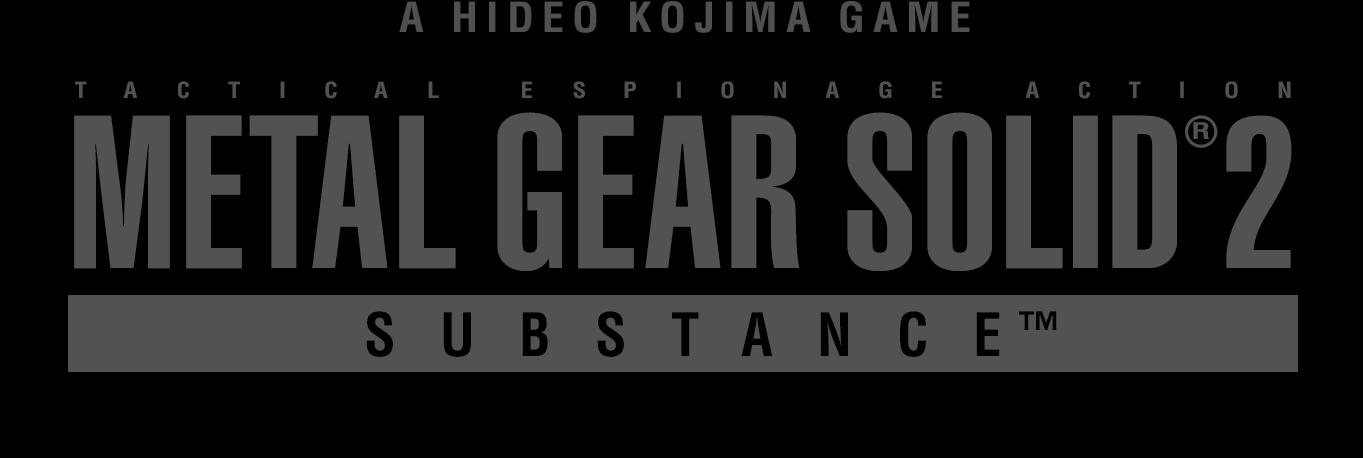
<style>
.page{position:relative;width:1363px;height:458px;background:#000000}
.page>*{position:absolute;margin:0}
.t1{font:40.4px "Helvetica-Condensed-Bold";letter-spacing:0.188em;color:#505050;scale:1.09 1}
.t2{font:21.8px "Helvetica-Condensed-Bold";letter-spacing:0.048em;color:#525252;scale:1.13 1}
.t3{font:213.8px "Helvetica-UltraCompressed";letter-spacing:0.048em;color:#525252;scale:1.09 1}
.t4{font:213.8px "Helvetica-UltraCompressed";letter-spacing:0.02em;color:#525252;scale:1.09 1}
.t5{font:40.9px "Helvetica-Condensed-Bold";letter-spacing:0.048em;color:#525252}
.t6{font:22.5px "Helvetica-Condensed-Bold";letter-spacing:0.048em;color:#525252;scale:1.37 1}
.t7{font:211.5px "Helvetica-UltraCompressed";letter-spacing:0.048em;color:#525252;scale:1.1 1}
.t8{font:58.5px "Helvetica-Condensed-Bold";letter-spacing:0.78em;color:#000000}
.t9{font:46.4px "Helvetica-Condensed-Bold";letter-spacing:0.78em;color:#000000;scale:1.04 1}
</style>
<div class="page">
<p class="t1" style="left:399px;top:1px;width:571px;height:32px">A HIDEO KOJIMA GAME</p>
<p class="t2" style="left:75px;top:81px;width:12px;height:17px">T</p>
<p class="t2" style="left:123px;top:81px;width:14px;height:17px">A</p>
<p class="t2" style="left:178px;top:81px;width:11px;height:18px">C</p>
<p class="t2" style="left:228px;top:81px;width:12px;height:17px">T</p>
<p class="t2" style="left:280px;top:81px;width:5px;height:17px">I</p>
<p class="t2" style="left:325px;top:81px;width:12px;height:18px">C</p>
<p class="t2" style="left:374px;top:81px;width:14px;height:17px">A</p>
<p class="t2" style="left:428px;top:81px;width:11px;height:17px">L</p>
<p class="t2" style="left:522px;top:81px;width:10px;height:17px">E</p>
<p class="t2" style="left:573px;top:81px;width:12px;height:18px">S</p>
<p class="t2" style="left:624px;top:81px;width:12px;height:17px">P</p>
<p class="t2" style="left:677px;top:81px;width:4px;height:17px">I</p>
<p class="t2" style="left:721px;top:81px;width:13px;height:18px">O</p>
<p class="t2" style="left:774px;top:81px;width:12px;height:17px">N</p>
<p class="t2" style="left:825px;top:81px;width:14px;height:17px">A</p>
<p class="t2" style="left:879px;top:81px;width:13px;height:18px">G</p>
<p class="t2" style="left:932px;top:81px;width:10px;height:17px">E</p>
<p class="t2" style="left:1025px;top:81px;width:14px;height:17px">A</p>
<p class="t2" style="left:1079px;top:81px;width:11px;height:18px">C</p>
<p class="t2" style="left:1129px;top:81px;width:12px;height:17px">T</p>
<p class="t2" style="left:1180px;top:81px;width:4px;height:17px">I</p>
<p class="t2" style="left:1225px;top:81px;width:13px;height:18px">O</p>
<p class="t2" style="left:1278px;top:81px;width:13px;height:17px">N</p>
<p class="t3" style="left:497px;top:112px;width:65px;height:159px">G</p>
<p class="t3" style="left:847px;top:112px;width:65px;height:159px">S</p>
<p class="t3" style="left:927px;top:112px;width:65px;height:159px">O</p>
<p class="t4" style="left:74px;top:115px;width:96px;height:154px">M</p>
<p class="t3" style="left:186px;top:115px;width:56px;height:154px">E</p>
<p class="t3" style="left:249px;top:115px;width:69px;height:153px">T</p>
<p class="t3" style="left:312px;top:115px;width:76px;height:153px">A</p>
<p class="t3" style="left:399px;top:115px;width:57px;height:154px">L</p>
<p class="t3" style="left:578px;top:115px;width:56px;height:154px">E</p>
<p class="t3" style="left:645px;top:115px;width:76px;height:153px">A</p>
<p class="t3" style="left:731px;top:115px;width:69px;height:153px">R</p>
<p class="t3" style="left:1006px;top:115px;width:57px;height:154px">L</p>
<p class="t3" style="left:1073px;top:115px;width:25px;height:153px">I</p>
<p class="t3" style="left:1112px;top:115px;width:65px;height:153px">D</p>
<p class="t5" style="left:1185px;top:115px;width:33px;height:33px">®</p>
<p class="t6" style="left:1193px;top:122px;width:16px;height:17px">R</p>
<p class="t7" style="left:1226px;top:115px;width:66px;height:153px">2</p>
<p class="t8" style="left:366px;top:311px;width:634px;height:46px">SUBSTANCE</p>
<p class="t9" style="left:1019px;top:311px;width:38px;height:19px">™</p>
</div>
